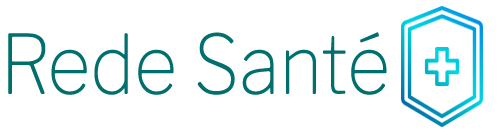
<style>
.page{position:relative;width:500px;height:135px;background:#ffffff}
.page>*{position:absolute;margin:0}
.t1{font:81.3px "LibreFranklin-Thin";color:#006f6d;scale:0.91 1}
</style>
<div class="page">
<p class="t1" style="left:8px;top:32px;width:379px;height:63px">Rede Santé</p>
</div>
